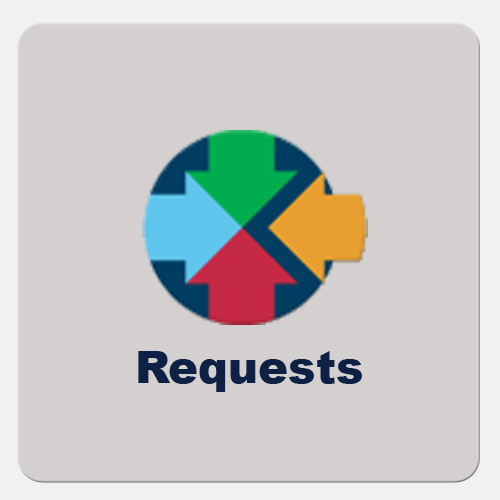
<style>
.page{position:relative;width:500px;height:500px;background:#d4d0d0}
.page>*{position:absolute;margin:0}
.t1{font:45px "Arial-Black";color:#0e2144}
</style>
<div class="page">
<p class="t1" style="left:138px;top:351px;width:224px;height:41px">Requests</p>
</div>
